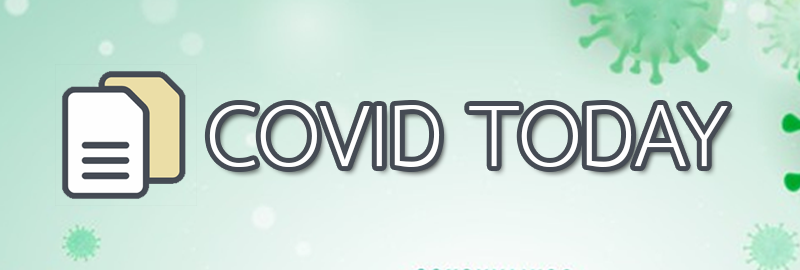
<style>
.page{position:relative;width:800px;height:270px}
.page>*{position:absolute;margin:0}
.t1{font:127px "THSarabunNew";color:#fefefe;text-transform:uppercase}
</style>
<div class="page">
<p class="t1" style="left:209px;top:105px;width:519px;height:62px">covid today</p>
</div>
